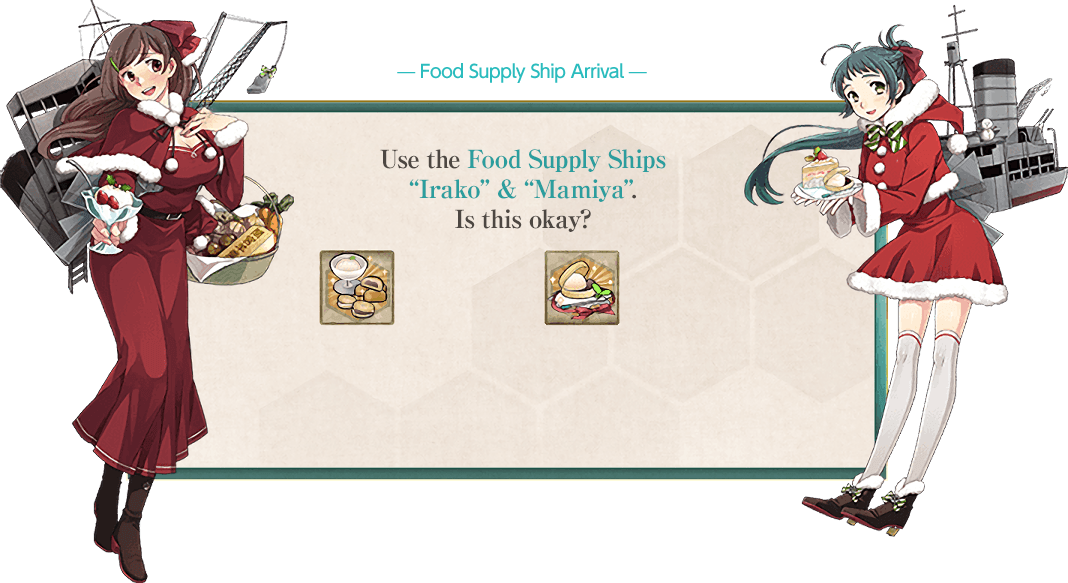
<style>
.page{position:relative;width:1068px;height:583px;background:#ffffff}
.page>*{position:absolute;margin:0}
.t1{font:18px "UDShinGoPro-Medium";letter-spacing:-0.04em;color:#2bbcbe}
.t2{font:25px "RyuminPro-ExBold";letter-spacing:-0.04em;color:#2b9e9e}
.t3{font:25px "RyuminPro-ExBold";letter-spacing:-0.04em;color:#4d4742}
</style>
<div class="page">
<p class="t1" style="left:397px;top:63px;width:250px;height:20px">— Food Supply Ship Arrival —</p>
<p class="t2" style="left:380px;top:149px;width:286px;height:83px;text-align:center"><span class="t3">Use the </span>Food Supply Ships<br>“Irako” &amp; “Mamiya”<span class="t3">.<br>Is this okay?</span></p>
</div>
